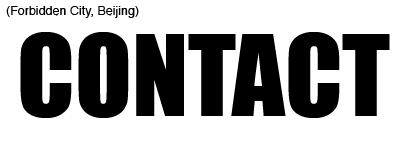
<style>
.page{position:relative;width:400px;height:150px;background:#ffffff}
.page>*{position:absolute;margin:0}
.t1{font:12.5px "Helvetica";color:#000000}
.t2{font:104.2px "Impact";color:#000000}
</style>
<div class="page">
<p class="t1" style="left:6px;top:6px;width:133px;height:12px">(Forbidden City, Beijing)</p>
<p class="t2" style="left:20px;top:32px;width:370px;height:86px">CONTACT</p>
</div>
